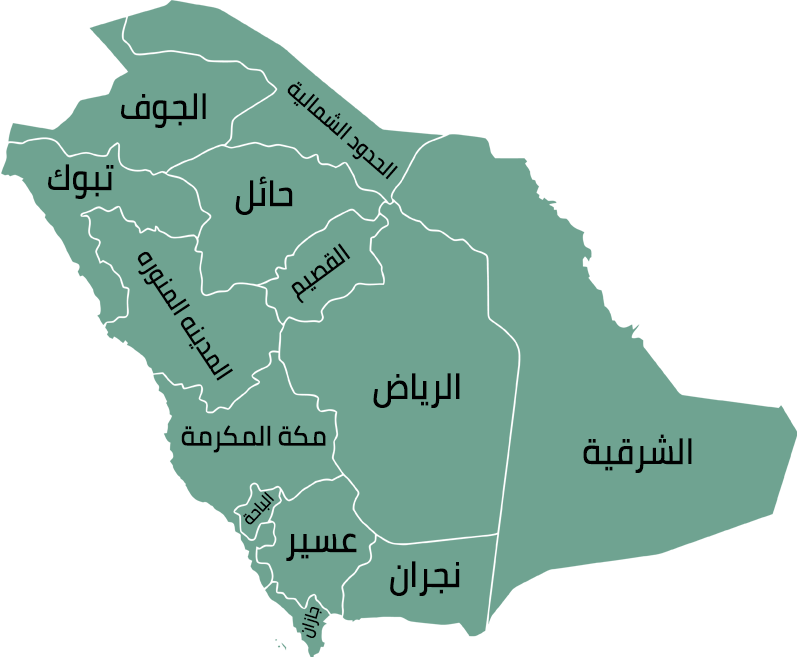
<style>
.page{position:relative;width:797px;height:657px;background:#ffffff}
.page>*{position:absolute;margin:0}
.t1{font:22.6px "Cairo-SemiBold";color:#000000;scale:0.9 1}
.t2{font:36px "Cairo-SemiBold";color:#000000;scale:0.9 1}
.t3{font:24.8px "Cairo-SemiBold";color:#000000;scale:0.9 1}
.t4{font:25.5px "Cairo-SemiBold";color:#000000;scale:0.9 1}
.t5{font:27.8px "Cairo-SemiBold";color:#000000;scale:0.9 1}
.t6{font:17px "Cairo-SemiBold";color:#000000;scale:0.9 1}
</style>
<div class="page">
<p class="t1" style="left:287px;top:81px;width:111px;height:99px;rotate:41deg">الحدود الشمالية</p>
<p class="t2" style="left:121px;top:93px;width:85px;height:35px">الجوف</p>
<p class="t2" style="left:48px;top:164px;width:66px;height:35px">تبوك</p>
<p class="t2" style="left:235px;top:176px;width:58px;height:39px">حائل</p>
<p class="t3" style="left:291px;top:243px;width:60px;height:61px;rotate:-36deg">القصيم</p>
<p class="t4" style="left:137px;top:251px;width:96px;height:130px;rotate:57deg">المدينه المنوره</p>
<p class="t2" style="left:373px;top:373px;width:87px;height:35px">الرياض</p>
<p class="t5" style="left:181px;top:425px;width:145px;height:28px">مكة المكرمة</p>
<p class="t2" style="left:583px;top:434px;width:109px;height:39px">الشرقية</p>
<p class="t6" style="left:243px;top:491px;width:32px;height:34px;rotate:-47deg">الباحة</p>
<p class="t2" style="left:286px;top:533px;width:71px;height:28px">عسير</p>
<p class="t2" style="left:390px;top:561px;width:70px;height:35px">نجران</p>
<p class="t6" style="left:301px;top:607px;width:21px;height:31px;rotate:-73deg">جازان</p>
</div>
